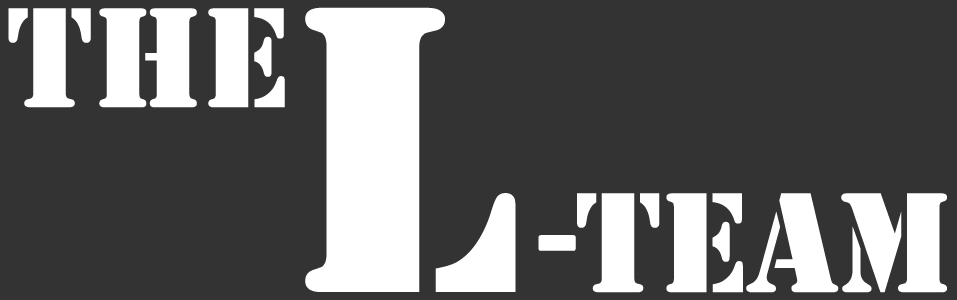
<style>
.page{position:relative;width:957px;height:300px;background:#333333}
.page>*{position:absolute;margin:0}
.t1{font:148.3px "Stencil";letter-spacing:-0.01em;color:#ffffff}
.t2{font:426.3px "Stencil";letter-spacing:-0.01em;color:#ffffff}
</style>
<div class="page">
<p class="t1" style="left:8px;top:8px;width:277px;height:100px">The</p>
<p class="t2" style="left:305px;top:7px;width:211px;height:285px">L</p>
<p class="t1" style="left:538px;top:193px;width:409px;height:100px">-Team</p>
</div>
